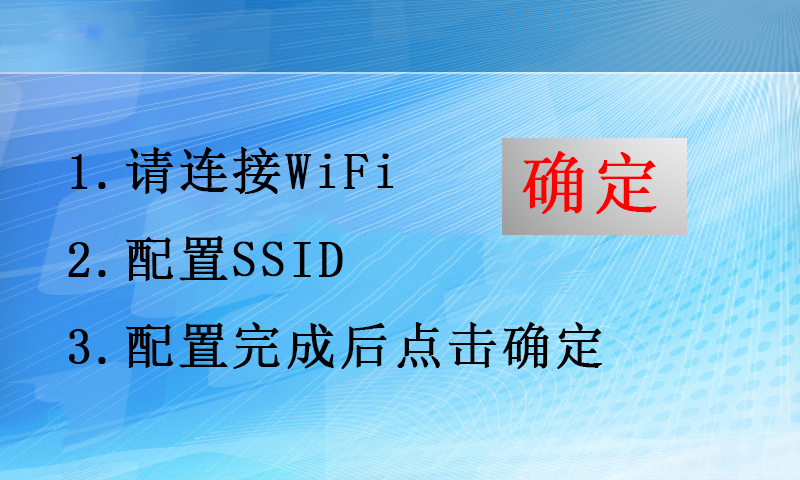
<style>
.page{position:relative;width:800px;height:480px}
.page>*{position:absolute;margin:0}
.t1{font:50px "SimSun";letter-spacing:0.05em;color:#000000;font-weight:bold}
.t2{font:66.7px "SimSun";letter-spacing:0.05em;color:#ff0000;font-weight:bold}
</style>
<div class="page">
<p class="t1" style="left:68px;top:147px;width:535px;height:222px">1.请连接WiFi<br>2.配置SSID<br>3.配置完成后点击确定</p>
<p class="t2" style="left:522px;top:151px;width:135px;height:63px">确定</p>
</div>
